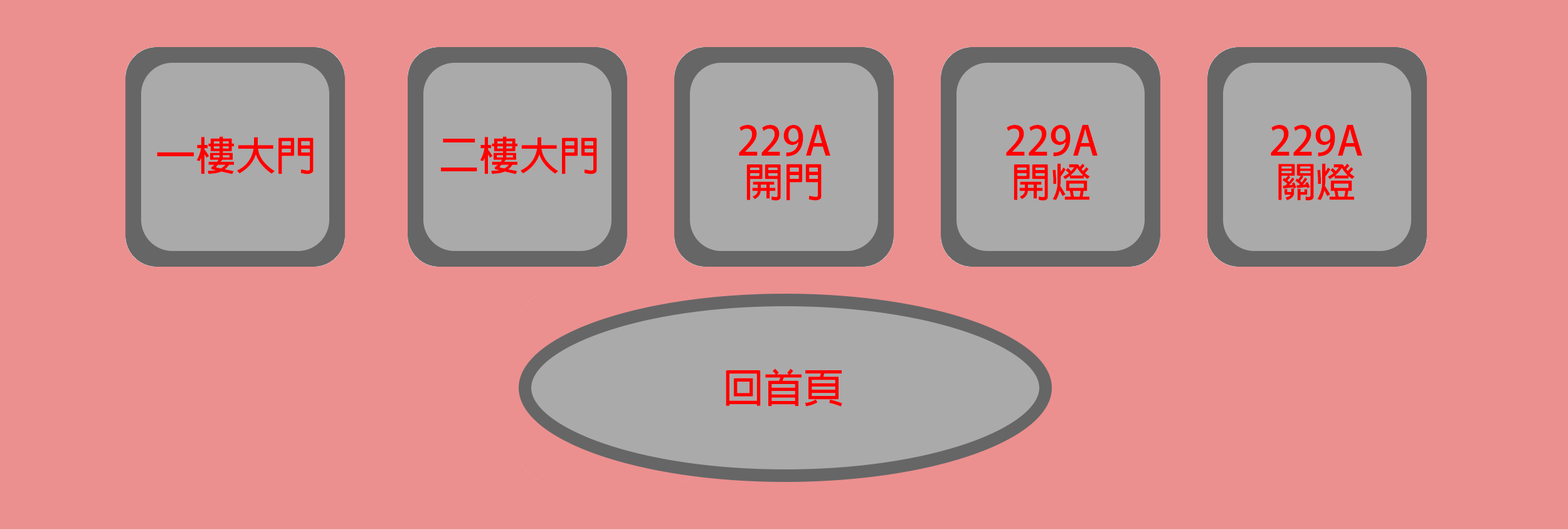
<style>
.page{position:relative;width:1568px;height:529px;background:#ec8f8f}
.page>*{position:absolute;margin:0}
.t1{font:40.1px/41.8px "AdobeFanHeitiStd-Bold";color:#ff0000}
.t2{font:40.1px "AdobeFanHeitiStd-Bold";color:#ff0000}
</style>
<div class="page">
<p class="t1" style="left:739px;top:125px;width:91px;height:76px;text-align:center">229A<br>開門</p>
<p class="t1" style="left:1006px;top:125px;width:92px;height:76px;text-align:center">229A<br>開燈</p>
<p class="t1" style="left:1271px;top:125px;width:91px;height:76px;text-align:center">229A<br>關燈</p>
<p class="t2" style="left:157px;top:136px;width:157px;height:38px">一樓大門</p>
<p class="t2" style="left:441px;top:136px;width:156px;height:38px">二樓大門</p>
<p class="t2" style="left:726px;top:368px;width:116px;height:38px">回首頁</p>
</div>
